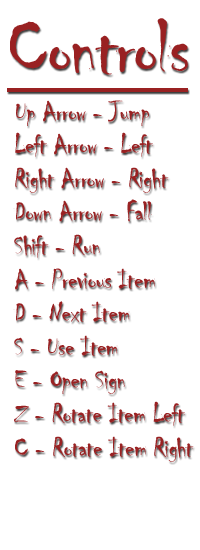
<style>
.page{position:relative;width:200px;height:550px;background:#ffffff}
.page>*{position:absolute;margin:0}
.t1{font:28px "Chiller-Regular";letter-spacing:-0.025em;color:#992122}
.t2{font:80.1px "Chiller-Regular";letter-spacing:-0.025em;color:#992122;text-decoration:underline}
</style>
<div class="page">
<p class="t1" style="left:7px;top:18px;width:187px;height:444px"><span class="t2">Controls  <br>  <br> </span>Up Arrow - Jump<br> Left Arrow - Left <br> Right Arrow - Right<br> Down Arrow - Fall<br> Shift - Run<br> A - Previous Item<br> D - Next Item<br> S - Use Item<br> E - Open Sign<br> Z - Rotate Item Left<br> C - Rotate Item Right</p>
</div>
